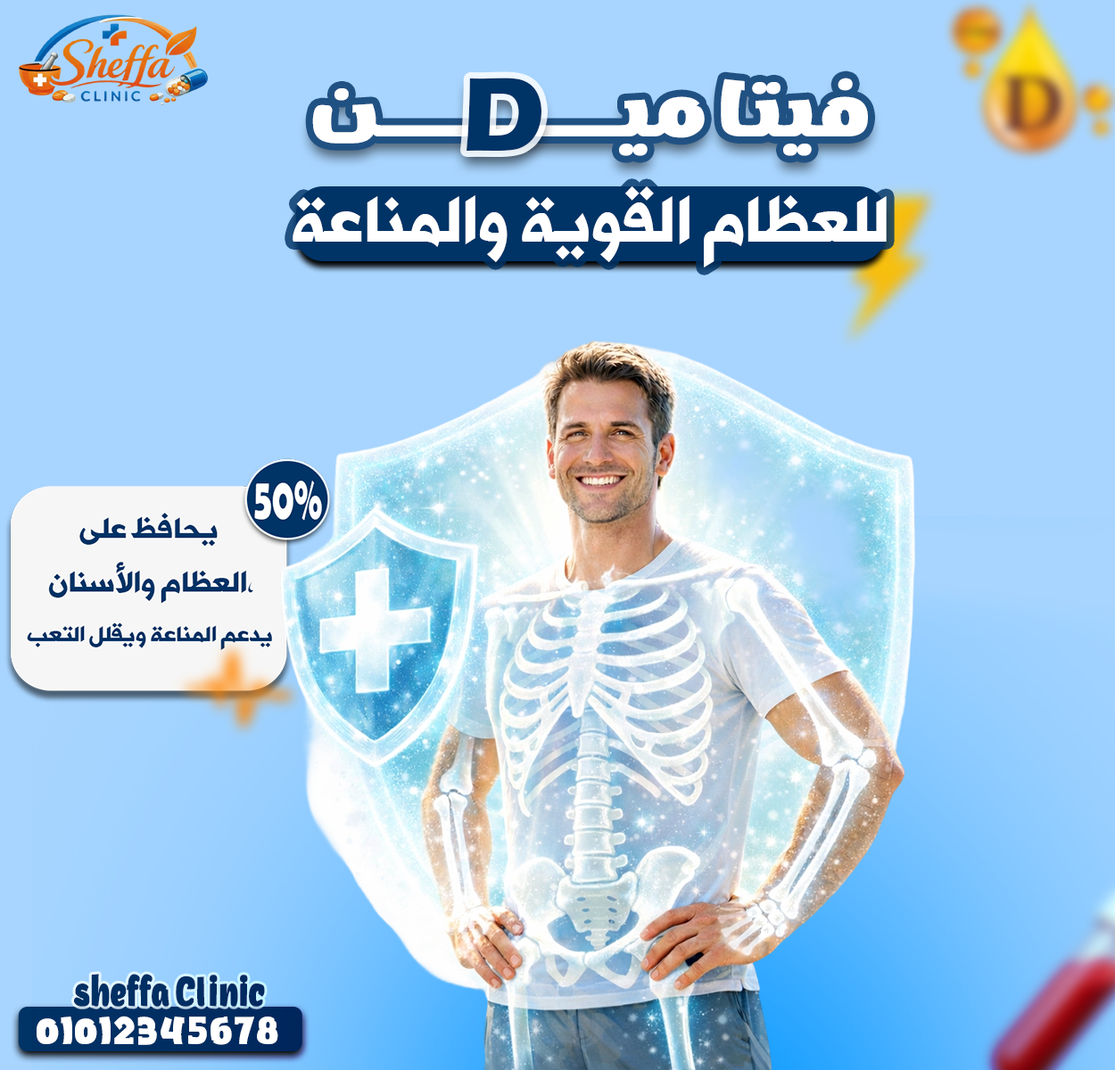
<style>
.page{position:relative;width:1115px;height:1070px;background:#a8d5ff}
.page>*{position:absolute;margin:0}
.t1{font:70.7px "DGAqsa";letter-spacing:0.055em;color:#ffffff}
.t2{font:107.5px "ErasITC-Bold";letter-spacing:-0.06em;color:#003366}
.t3{font:62.7px "AlHurraTxtBold";color:#ffffff}
.t4{font:41.3px "DGAqsa";color:#003366;scale:0.64 1}
.t5{font:33.6px "DGAqsa";color:#ffffff}
</style>
<div class="page">
<p class="t1" style="left:312px;top:78px;width:556px;height:78px">فيتاميــــــــن</p>
<p class="t2" style="left:466px;top:78px;width:75px;height:73px">D</p>
<p class="t3" style="left:292px;top:186px;width:594px;height:81px">للعظام القوية والمناعة</p>
<p class="t4" style="left:74px;top:974px;width:191px;height:33px">sheffa Clinic</p>
<p class="t5" style="left:37px;top:1016px;width:241px;height:29px">01012345678</p>
</div>
